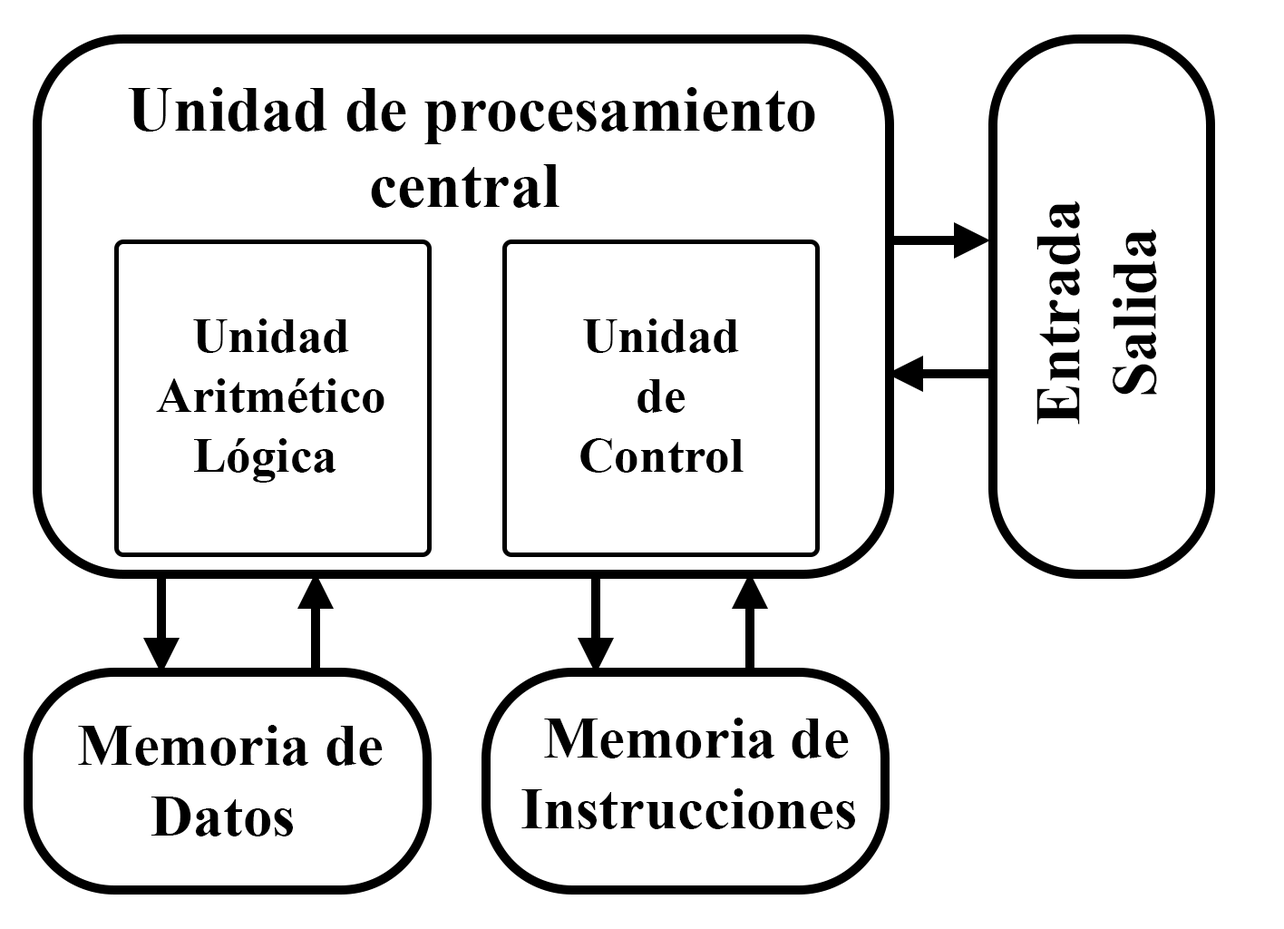
<style>
.page{position:relative;width:1284px;height:929px;background:#ffffff}
.page>*{position:absolute;margin:0}
.t1{font:63.5px "TimesNewRomanPS-BoldMT";color:#000000}
.t2{font:63.6px "TimesNewRomanPS-BoldMT";color:#000000}
.t3{font:49.9px "TimesNewRomanPS-BoldMT";color:#000000}
.t4{font:58.9px "TimesNewRomanPS-BoldMT";color:#000000}
</style>
<div class="page">
<p class="t1" style="left:128px;top:87px;width:687px;height:121px;text-align:center">Unidad de procesamiento <br>central</p>
<p class="t2" style="left:1037px;top:200px;width:120px;height:224px;text-align:center;rotate:-90deg">Entrada<br>Salida</p>
<p class="t3" style="left:156px;top:318px;width:229px;height:164px;text-align:center">Unidad <br>Aritmético <br>Lógica</p>
<p class="t3" style="left:580px;top:318px;width:164px;height:154px;text-align:center">Unidad <br>de <br>Control</p>
<p class="t4" style="left:78px;top:725px;width:305px;height:111px;text-align:center">Memoria de <br>Datos</p>
<p class="t4" style="left:521px;top:717px;width:334px;height:112px;text-align:center">Memoria de <br>Instrucciones</p>
</div>
